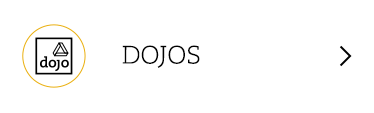
<style>
.page{position:relative;width:374px;height:113px;background:#ffffff}
.page>*{position:absolute;margin:0}
.t1{font:25px "CaeciliaLTStd-Light";color:#000000}
</style>
<div class="page">
<p class="t1" style="left:122px;top:45px;width:78px;height:23px">DOJOS</p>
<p class="t1" style="left:122px;top:45px;width:78px;height:23px">DOJOS</p>
</div>
